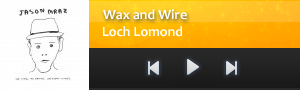
<style>
.page{position:relative;width:300px;height:90px}
.page>*{position:absolute;margin:0}
.t1{font:14px "Candara-Bold";color:#ffffff}
</style>
<div class="page">
<p class="t1" style="left:103px;top:9px;width:84px;height:11px">Wax and Wire</p>
<p class="t1" style="left:103px;top:26px;width:80px;height:11px">Loch Lomond</p>
</div>
